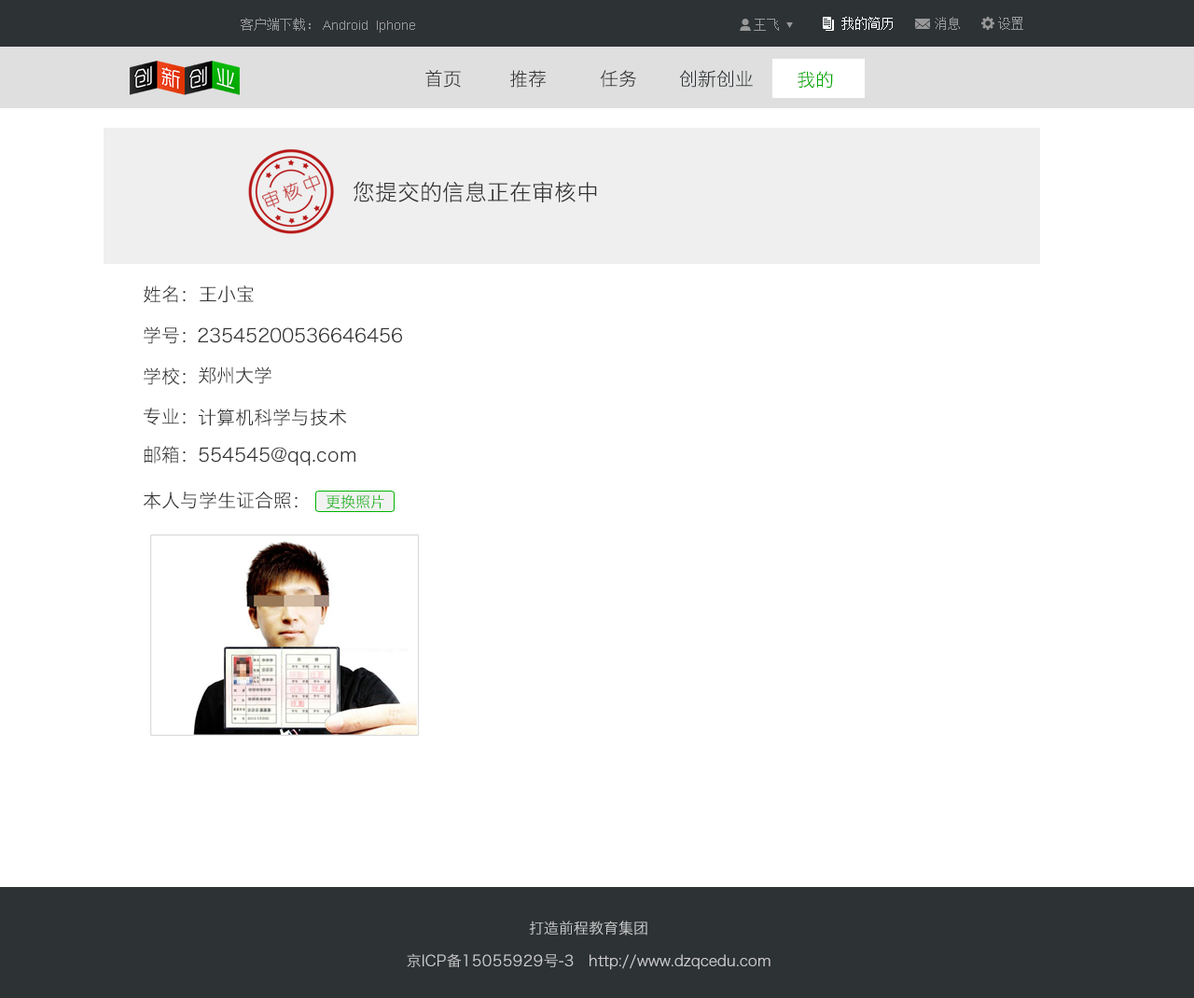
<style>
.page{position:relative;width:1194px;height:998px;background:#ffffff}
.page>*{position:absolute;margin:0}
.t1{font:13.1px "SimSun";color:#999999}
.t2{font:13.1px "SimSun";color:#ffffff}
.t3{font:13.1px "ArialMT";color:#999999}
.t4{font:18.7px "HiraginoSansGB-W3";color:#333333}
.t5{font:18.7px "HiraginoSansGB-W3";color:#2d3235}
.t6{font:18.7px "HiraginoSansGB-W3";color:#03a902}
.t7{font:22.4px "HiraginoSansGB-W3";color:#333333}
.t8{font:14.9px "HiraginoSansGB-W3";color:#00b300}
.t9{font:14.9px "HiraginoSansGB-W3";color:#cccccc}
</style>
<div class="page">
<p class="t1" style="left:241px;top:18px;width:70px;height:13px">客户端下载：</p>
<p class="t2" style="left:842px;top:17px;width:51px;height:13px">我的简历</p>
<p class="t1" style="left:935px;top:17px;width:25px;height:13px">消息</p>
<p class="t1" style="left:998px;top:17px;width:26px;height:13px">设置</p>
<p class="t3" style="left:323px;top:21px;width:92px;height:12px">Android  Iphone</p>
<p class="t1" style="left:754px;top:19px;width:25px;height:12px">王飞</p>
<p class="t4" style="left:425px;top:70px;width:36px;height:18px">首页</p>
<p class="t4" style="left:510px;top:70px;width:36px;height:18px">推荐</p>
<p class="t4" style="left:600px;top:70px;width:36px;height:18px">任务</p>
<p class="t5" style="left:679px;top:70px;width:74px;height:18px">创新创业</p>
<p class="t6" style="left:798px;top:71px;width:35px;height:18px">我的</p>
<p class="t7" style="left:353px;top:181px;width:244px;height:21px">您提交的信息正在审核中</p>
<p class="t4" style="left:144px;top:286px;width:42px;height:17px">姓名：</p>
<p class="t4" style="left:200px;top:286px;width:54px;height:16px">王小宝</p>
<p class="t4" style="left:144px;top:327px;width:42px;height:17px">学号：</p>
<p class="t4" style="left:198px;top:328px;width:204px;height:15px">23545200536646456</p>
<p class="t4" style="left:144px;top:368px;width:42px;height:17px">学校：</p>
<p class="t4" style="left:198px;top:367px;width:74px;height:17px">郑州大学</p>
<p class="t4" style="left:144px;top:408px;width:42px;height:17px">专业：</p>
<p class="t4" style="left:199px;top:409px;width:148px;height:17px">计算机科学与技术</p>
<p class="t4" style="left:144px;top:446px;width:42px;height:18px">邮箱：</p>
<p class="t4" style="left:199px;top:447px;width:157px;height:20px">554545@qq.com</p>
<p class="t4" style="left:143px;top:492px;width:155px;height:17px">本人与学生证合照：</p>
<p class="t8" style="left:326px;top:495px;width:58px;height:14px">更换照片</p>
<p class="t9" style="left:529px;top:921px;width:119px;height:15px">打造前程教育集团</p>
<p class="t9" style="left:407px;top:954px;width:364px;height:16px">京ICP备15055929号-3   http://www.dzqcedu.com</p>
</div>
